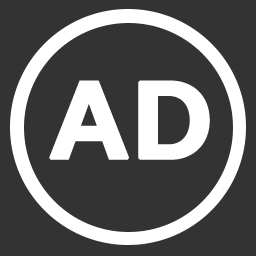
<style>
.page{position:relative;width:256px;height:256px;background:#333333}
.page>*{position:absolute;margin:0}
.t1{font:107.6px "BreezeSans-Bold";color:#ffffff;font-weight:bold;scale:1.05 1}
</style>
<div class="page">
<p class="t1" style="left:49px;top:80px;width:161px;height:80px">AD</p>
</div>
